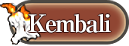
<style>
.page{position:relative;width:129px;height:46px}
.page>*{position:absolute;margin:0}
.t1{font:24px "RyuminPro-ExBold";letter-spacing:-0.08em;color:#ffffff}
</style>
<div class="page">
<p class="t1" style="left:28px;top:14px;width:83px;height:19px">Kembali</p>
</div>
